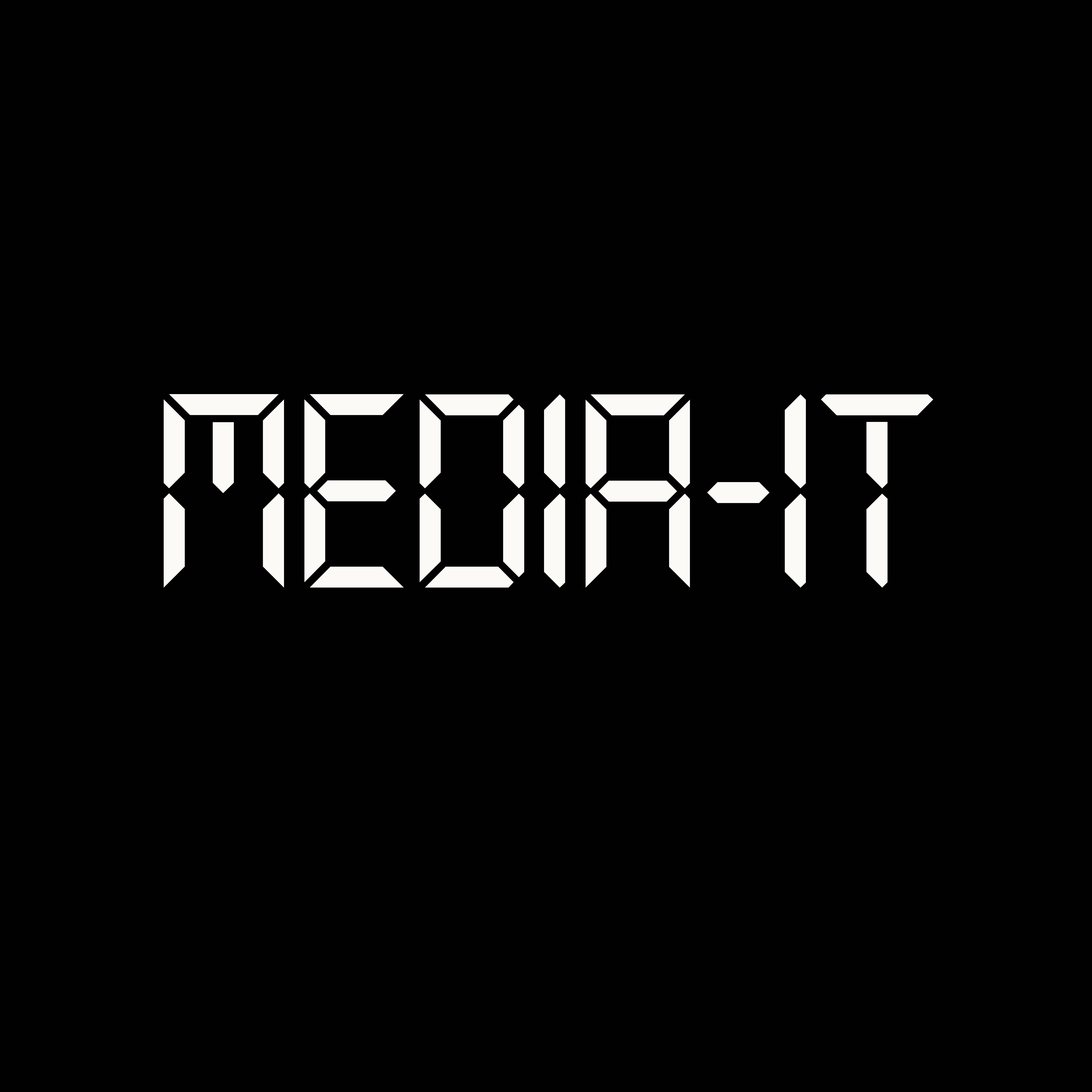
<style>
.page{position:relative;width:1092px;height:1092px;background:#010101}
.page>*{position:absolute;margin:0}
.t1{font:280.2px "Technology-Regular";color:#fcfaf7}
</style>
<div class="page">
<p class="t1" style="left:164px;top:394px;width:769px;height:194px">mEDIA-IT</p>
</div>
